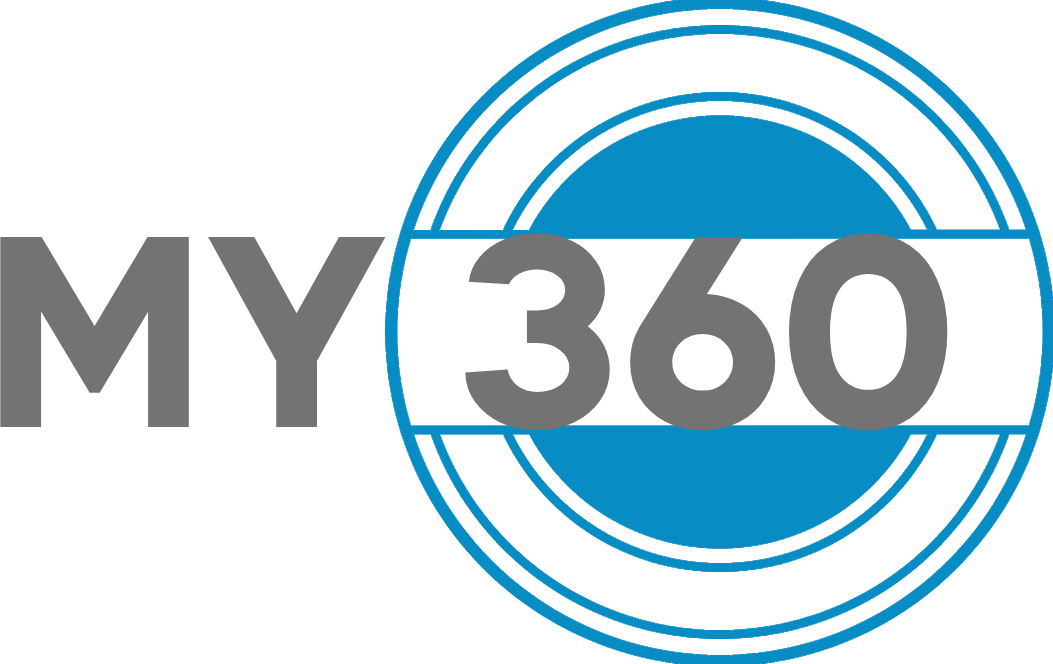
<style>
.page{position:relative;width:1053px;height:664px;background:#ffffff}
.page>*{position:absolute;margin:0}
.t1{font:271.6px "THICCCBOI-ExtraBold";color:#737373}
</style>
<div class="page">
<p class="t1" style="left:0px;top:233px;width:948px;height:198px">MY 360</p>
</div>
